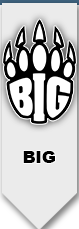
<style>
.page{position:relative;width:79px;height:229px;background:#ebebeb}
.page>*{position:absolute;margin:0}
.t1{font:16.7px "Arial-Black";letter-spacing:-0.01em;color:#000000}
</style>
<div class="page">
<p class="t1" style="left:23px;top:151px;width:32px;height:12px">BIG</p>
</div>
